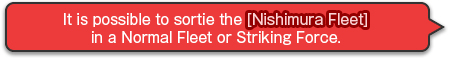
<style>
.page{position:relative;width:450px;height:58px;background:#ed3b3b}
.page>*{position:absolute;margin:0}
.t1{font:14px/18px "GothicMB101Pro-Regular";color:#ffffff}
.t2{font:14px/18px "GothicMB101Pro-Regular";color:#ffd3d3}
</style>
<div class="page">
<p class="t1" style="left:64px;top:13px;width:303px;height:32px;text-align:center">It is possible to sortie the <span class="t2">[Nishimura Fleet]<br></span>in a Normal Fleet or Striking Force.</p>
<p class="t1" style="left:64px;top:13px;width:303px;height:32px;text-align:center">It is possible to sortie the <span class="t2">[Nishimura Fleet]<br></span>in a Normal Fleet or Striking Force.</p>
</div>
